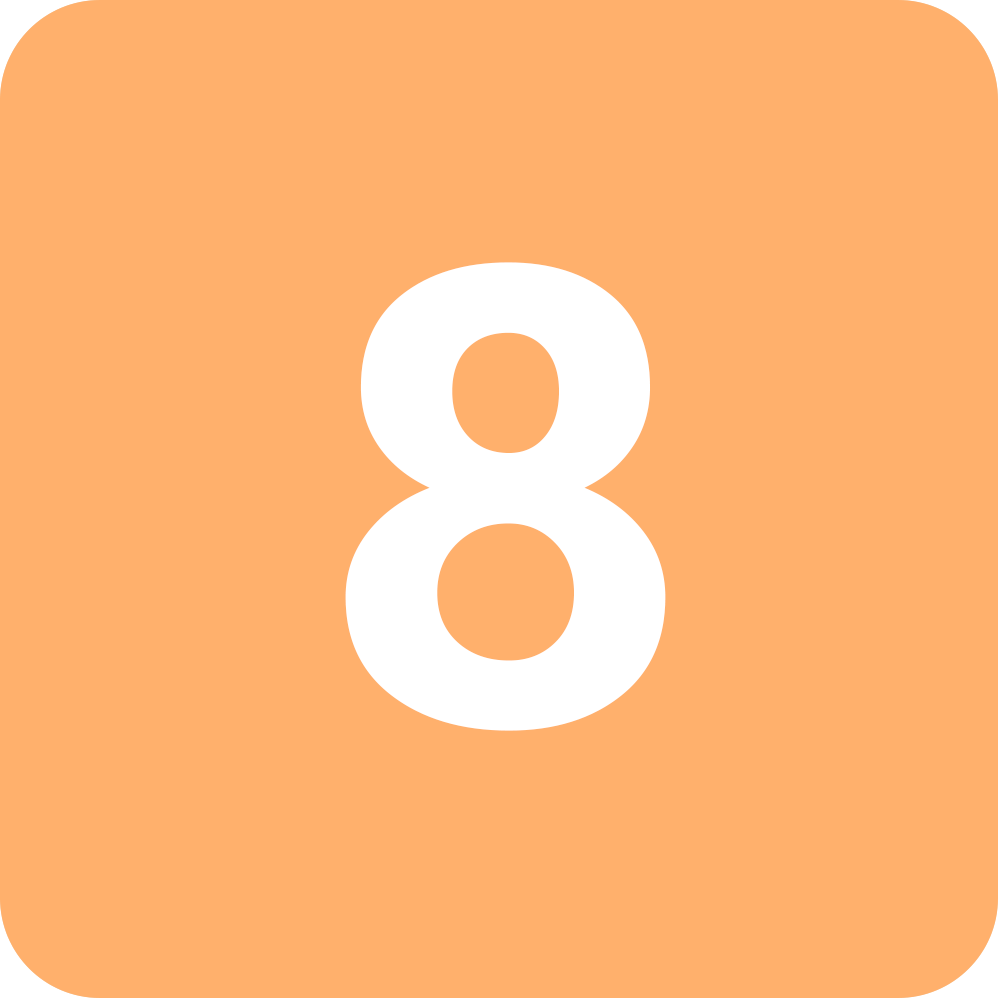
<style>
.page{position:relative;width:998px;height:998px;background:#ffb06c}
.page>*{position:absolute;margin:0}
.t1{font:640px "Roboto-Bold";color:#ffffff}
</style>
<div class="page">
<p class="t1" style="left:345px;top:262px;width:321px;height:469px">8</p>
</div>
